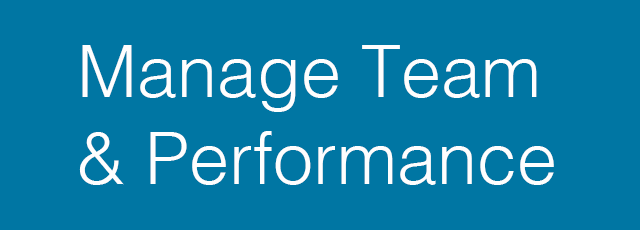
<style>
.page{position:relative;width:640px;height:230px;background:#0076a3}
.page>*{position:absolute;margin:0}
.t1{font:72px "Helvetica-Light";color:#fefefe}
</style>
<div class="page">
<p class="t1" style="left:79px;top:45px;width:475px;height:140px">Manage Team <br>&amp; Performance</p>
</div>
